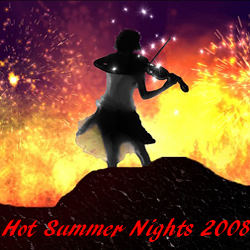
<style>
.page{position:relative;width:250px;height:250px}
.page>*{position:absolute;margin:0}
.t1{font:24px "ARBLANCA";color:#ff0000}
</style>
<div class="page">
<p class="t1" style="left:1px;top:218px;width:250px;height:24px">Hot Summer Nights 2008</p>
</div>
